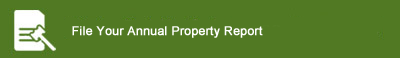
<style>
.page{position:relative;width:400px;height:58px;background:#517923}
.page>*{position:absolute;margin:0}
.t1{font:12px "ArialMT";letter-spacing:0.01em;color:#ffffff;font-weight:bold}
</style>
<div class="page">
<p class="t1" style="left:72px;top:26px;width:191px;height:12px">File Your Annual Property Report</p>
</div>
